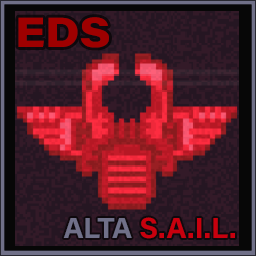
<style>
.page{position:relative;width:256px;height:256px}
.page>*{position:absolute;margin:0}
.t1{font:41.7px "AcuminConcept_760.000wght_112.000wdth";color:#9e0000}
.t2{font:29.2px "AcuminConcept-Bold";color:#c8000e}
.t3{font:29.2px "AcuminConcept-Bold";color:#707088}
</style>
<div class="page">
<p class="t1" style="left:18px;top:17px;width:91px;height:31px">EDS</p>
<p class="t2" style="left:63px;top:217px;width:172px;height:22px"><span class="t3">ALTA </span>S.A.I.L.</p>
</div>
